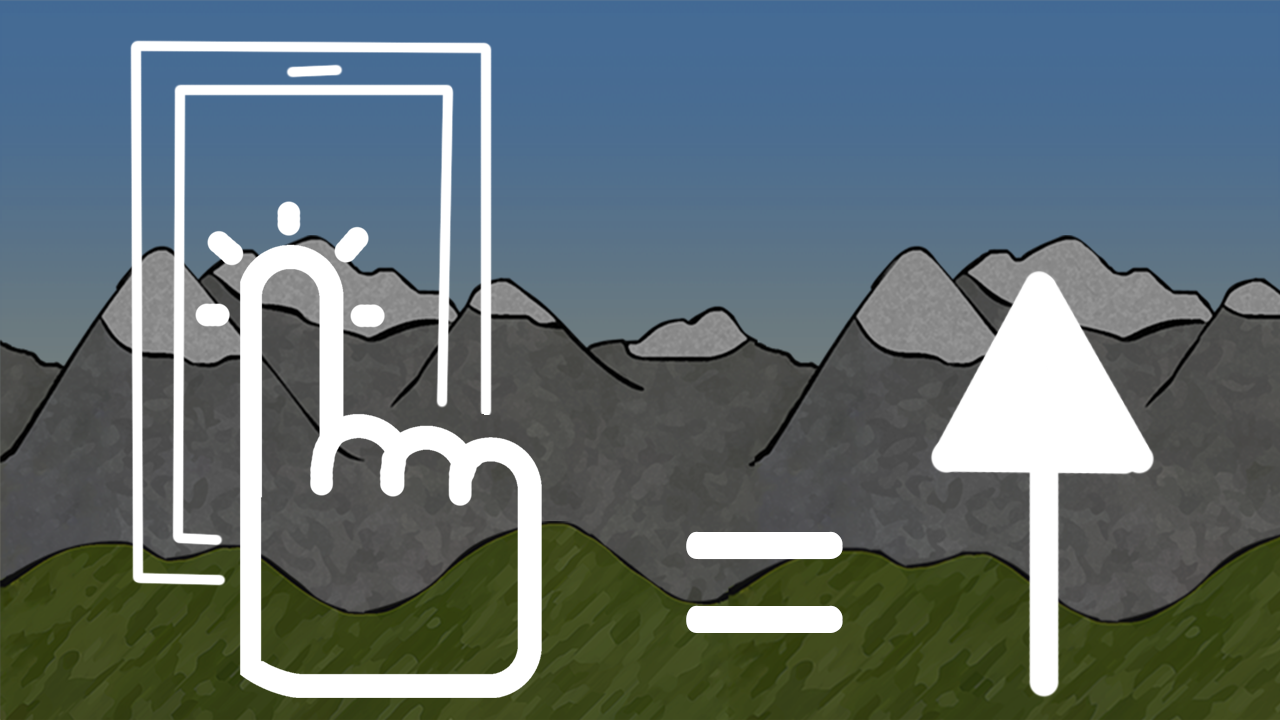
<style>
.page{position:relative;width:1280px;height:720px}
.page>*{position:absolute;margin:0}
.t1{font:370.2px "KAWAIITEGAKIMOJI";color:#ffffff}
</style>
<div class="page">
<p class="t1" style="left:686px;top:531px;width:157px;height:102px">=</p>
</div>
